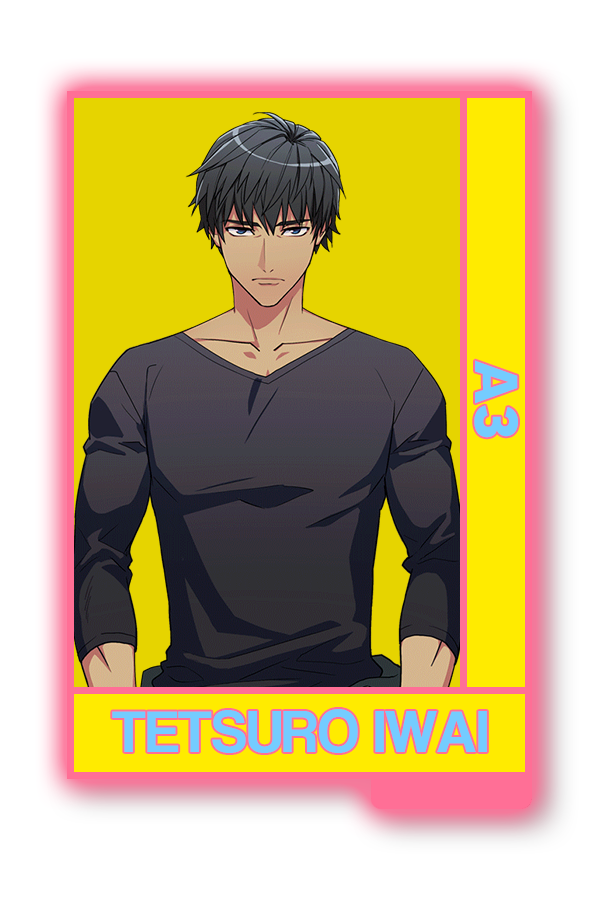
<style>
.page{position:relative;width:600px;height:900px;background:#ffffff}
.page>*{position:absolute;margin:0}
.t1{font:60.5px "MADETOMMY-Bold";color:#74ccff}
.t2{font:61.2px "CoolveticaRg-Regular";color:#74ccff}
</style>
<div class="page">
<p class="t1" style="left:474px;top:360px;width:44px;height:78px;rotate:90deg">A3</p>
<p class="t2" style="left:112px;top:709px;width:375px;height:44px">TETSURO IWAI</p>
</div>
